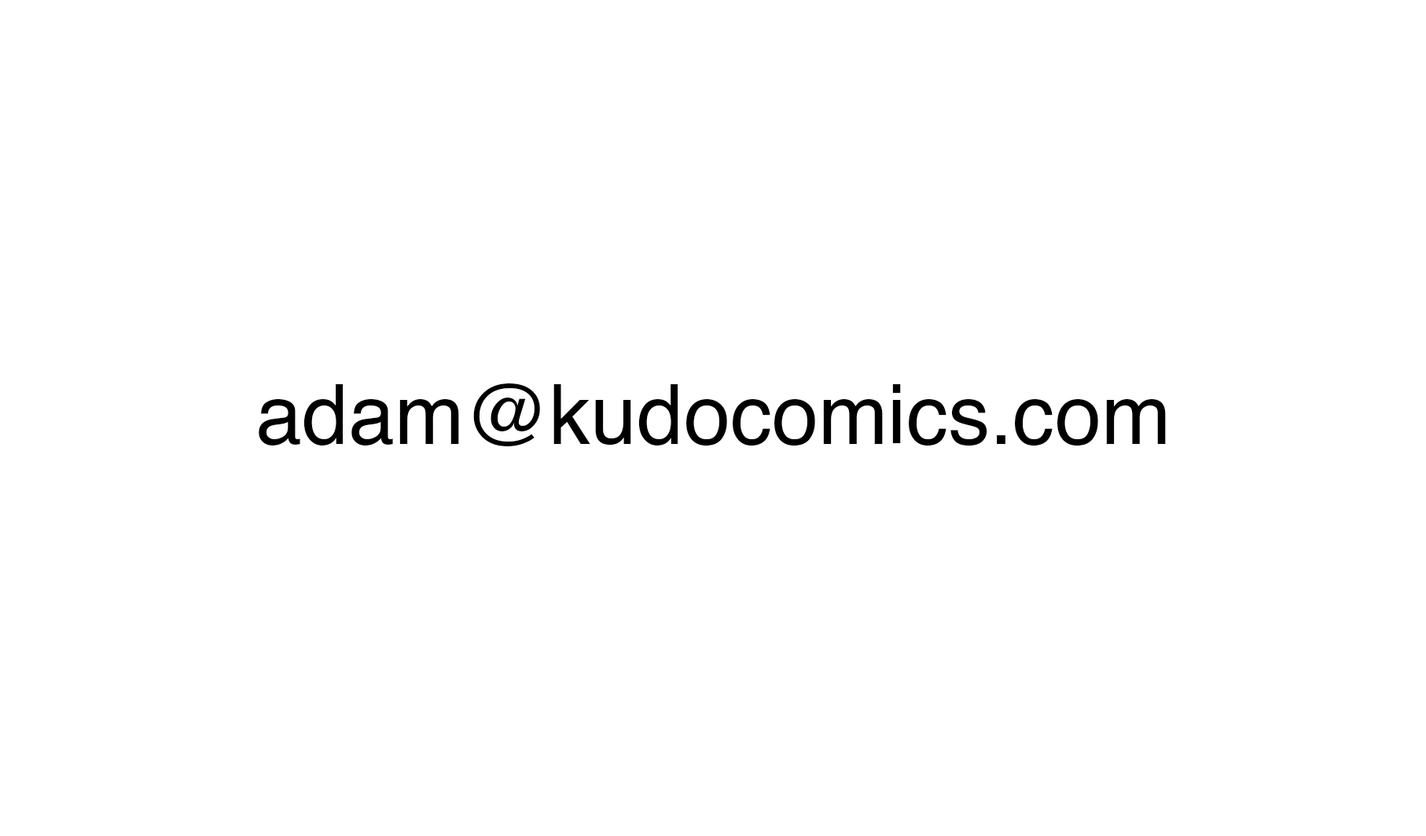
<style>
.page{position:relative;width:1426px;height:836px;background:#ffffff}
.page>*{position:absolute;margin:0}
.t1{font:83.5px "Helvetica";color:#000000}
</style>
<div class="page">
<p class="t1" style="left:259px;top:384px;width:907px;height:62px">adam@kudocomics.com</p>
</div>
